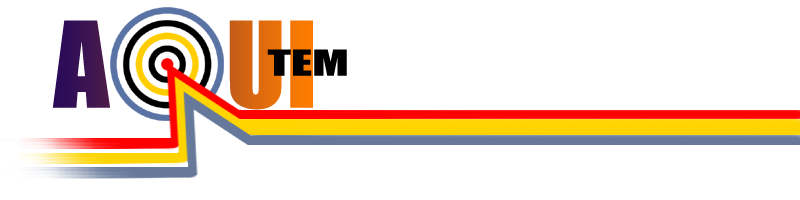
<style>
.page{position:relative;width:800px;height:200px;background:#ffffff}
.page>*{position:absolute;margin:0}
.t1{font:109.9px "Impact"}
.t2{font:33.2px "Impact";color:#000000;scale:1.54 1}
</style>
<div class="page">
<p class="t1" style="left:52px;top:20px;width:261px;height:90px">A      UI</p>
<p class="t2" style="left:267px;top:49px;width:80px;height:27px">TEM</p>
</div>
